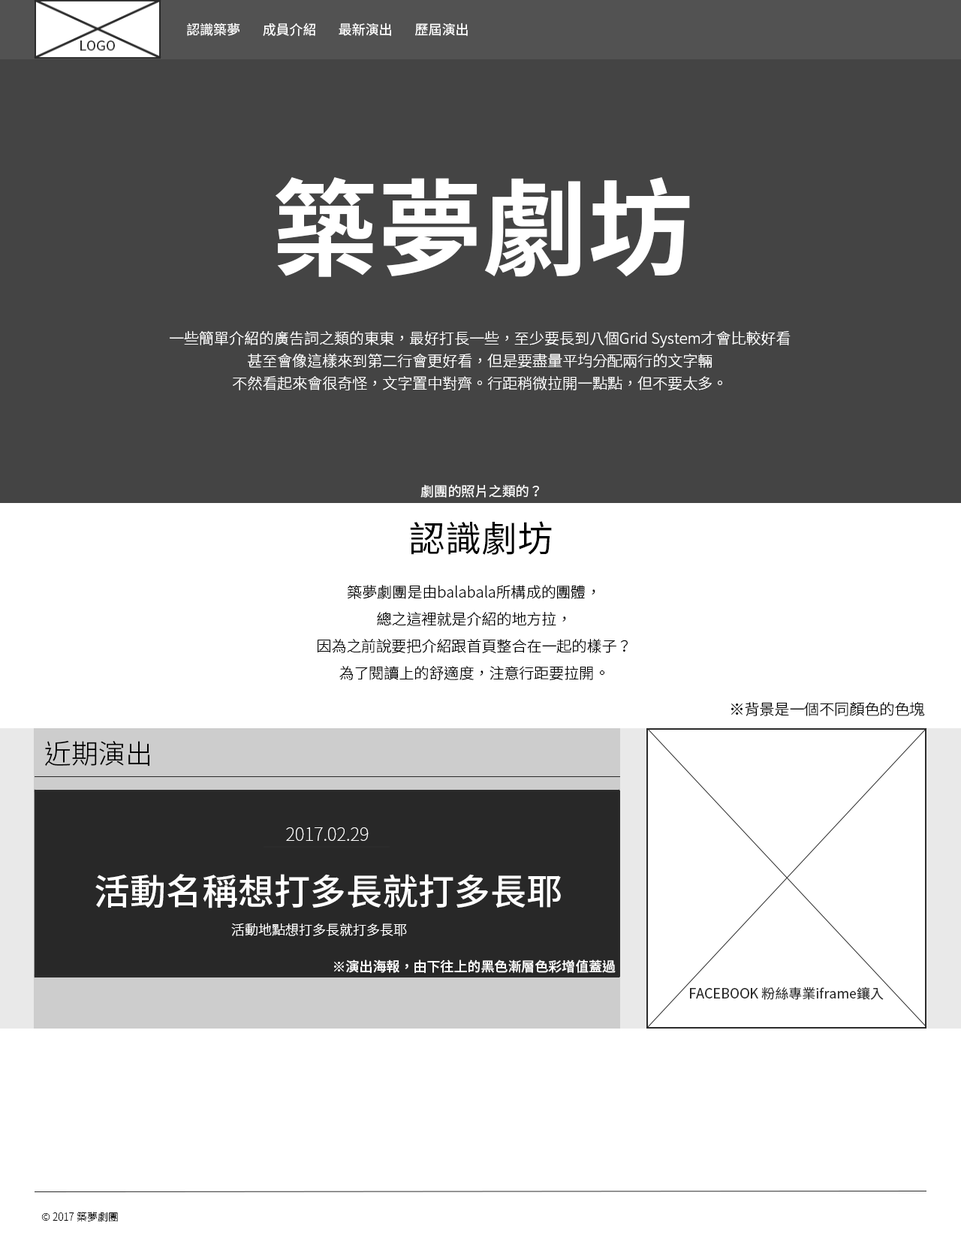
<style>
.page{position:relative;width:961px;height:1241px;background:#ffffff}
.page>*{position:absolute;margin:0}
.t1{font:13.5px "NotoSansCJKtc-Regular";color:#ffffff}
.t2{font:105.1px "NotoSansCJKtc-Bold";color:#ffffff}
.t3{font:15px/22.5px "NotoSansCJKtc-Light";color:#ffffff}
.t4{font:36px "NotoSansCJKtc-Regular";color:#000000}
.t5{font:15px/27px "NotoSansCJKtc-Light";color:#000000}
.t6{font:15px "NotoSansCJKtc-Light";color:#000000}
.t7{font:27px "NotoSansCJKtc-Light";color:#000000}
.t8{font:18px "NotoSansCJKtc-Thin";color:#ffffff}
.t9{font:36px "NotoSansCJKtc-Medium";color:#ffffff}
.t10{font:13.5px "NotoSansCJKtc-Light";color:#ffffff}
.t11{font:13.5px "NotoSansCJKtc-Medium";color:#ffffff}
.t12{font:13.5px "NotoSansCJKtc-Regular";color:#2b2b2b}
.t13{font:10.5px "NotoSansCJKtc-Thin";color:#000000}
</style>
<div class="page">
<p class="t1" style="left:187px;top:23px;width:53px;height:13px">認識築夢</p>
<p class="t1" style="left:263px;top:23px;width:52px;height:13px">成員介紹</p>
<p class="t1" style="left:339px;top:23px;width:52px;height:13px">最新演出</p>
<p class="t1" style="left:415px;top:23px;width:53px;height:13px">歷屆演出</p>
<p class="t2" style="left:276px;top:177px;width:414px;height:100px">築夢劇坊</p>
<p class="t3" style="left:170px;top:331px;width:621px;height:59px;text-align:center">一些簡單介紹的廣告詞之類的東東，最好打長一些，至少要長到八個Grid System才會比較好看<br>甚至會像這樣來到第二行會更好看，但是要盡量平均分配兩行的文字輛<br>不然看起來會很奇怪，文字置中對齊。行距稍微拉開一點點，但不要太多。</p>
<p class="t1" style="left:420px;top:484px;width:119px;height:14px">劇團的照片之類的？</p>
<p class="t4" style="left:410px;top:521px;width:142px;height:34px">認識劇坊</p>
<p class="t5" style="left:318px;top:585px;width:310px;height:95px;text-align:center">築夢劇團是由balabala所構成的團體，<br>總之這裡就是介紹的地方拉，<br>因為之前說要把介紹跟首頁整合在一起的樣子？<br>為了閱讀上的舒適度，注意行距要拉開。</p>
<p class="t6" style="left:731px;top:702px;width:194px;height:14px">※背景是一個不同顏色的色塊</p>
<p class="t7" style="left:45px;top:740px;width:104px;height:26px">近期演出</p>
<p class="t8" style="left:286px;top:827px;width:83px;height:14px">2017.02.29</p>
<p class="t9" style="left:95px;top:874px;width:466px;height:34px">活動名稱想打多長就打多長耶</p>
<p class="t10" style="left:231px;top:923px;width:176px;height:13px">活動地點想打多長就打多長耶</p>
<p class="t11" style="left:334px;top:959px;width:282px;height:14px">※演出海報，由下往上的黑色漸層色彩增值蓋過</p>
<p class="t12" style="left:690px;top:986px;width:194px;height:14px">FACEBOOK 粉絲專業iframe鑲入</p>
<p class="t13" style="left:41px;top:1212px;width:77px;height:10px">© 2017 築夢劇團</p>
</div>
